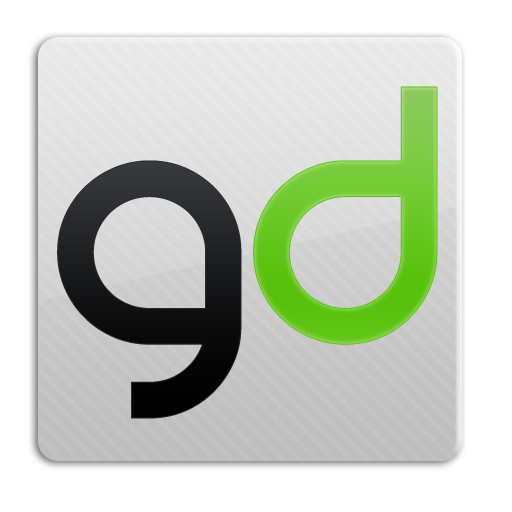
<style>
.page{position:relative;width:512px;height:512px;background:#ffffff}
.page>*{position:absolute;margin:0}
.t1{font:410px "REZ"}
</style>
<div class="page">
<p class="t1" style="left:57px;top:86px;width:381px;height:333px">gd</p>
<p class="t1" style="left:57px;top:86px;width:381px;height:333px">gd</p>
</div>
